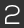
<style>
.page{position:relative;width:24px;height:28px;background:#333333}
.page>*{position:absolute;margin:0}
.t1{font:27.3px "NexaLight";color:#ffffff}
</style>
<div class="page">
<p class="t1" style="left:5px;top:5px;width:15px;height:19px">2</p>
</div>
